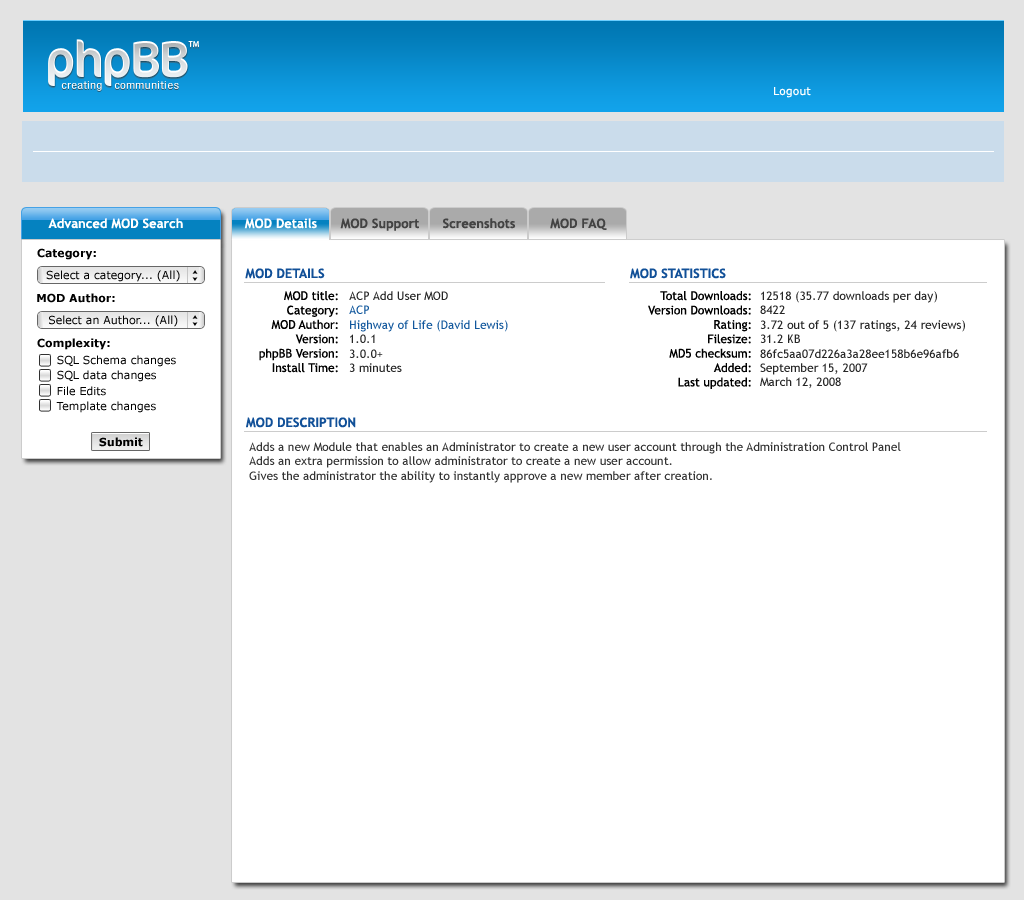
<style>
.page{position:relative;width:1024px;height:900px;background:#ffffff}
.page>*{position:absolute;margin:0}
.t1{font:11px "Verdana";color:#ffffff}
.t2{font:13px "TrebuchetMS-Bold";color:#ffffff}
.t3{font:13px "TrebuchetMS-Bold";color:#434343}
.t4{font:11px "Verdana-Bold";color:#000000}
.t5{font:11px "Verdana";color:#000000}
.t6{font:13px "TrebuchetMS-Bold";color:#115098}
.t7{font:12px "TrebuchetMS";color:#000000}
.t8{font:12px "TrebuchetMS";color:#12589d}
.t9{font:12px "TrebuchetMS";color:#262626}
.t10{font:12px "TrebuchetMS";color:#333333}
</style>
<div class="page">
<p class="t1" style="left:774px;top:87px;width:37px;height:11px">Logout</p>
<p class="t2" style="left:48px;top:218px;width:135px;height:11px">Advanced MOD Search</p>
<p class="t2" style="left:244px;top:218px;width:73px;height:11px">MOD Details</p>
<p class="t3" style="left:340px;top:218px;width:79px;height:13px">MOD Support</p>
<p class="t3" style="left:443px;top:218px;width:73px;height:11px">Screenshots</p>
<p class="t3" style="left:550px;top:218px;width:57px;height:12px">MOD FAQ</p>
<p class="t4" style="left:37px;top:248px;width:59px;height:12px">Category:</p>
<p class="t5" style="left:46px;top:270px;width:134px;height:12px">Select a category... (All)</p>
<p class="t6" style="left:245px;top:268px;width:80px;height:11px">MOD DETAILS</p>
<p class="t6" style="left:630px;top:268px;width:96px;height:11px">MOD STATISTICS</p>
<p class="t4" style="left:37px;top:293px;width:78px;height:10px">MOD Author:</p>
<p class="t7" style="left:259px;top:291px;width:79px;height:82px;text-align:right">MOD title:<br>Category:<br>MOD Author:<br>Version:<br>phpBB Version:<br>Install Time:</p>
<p class="t8" style="left:349px;top:291px;width:159px;height:81px"><span class="t9">ACP Add User MOD<br></span>ACP<br>Highway of Life (David Lewis)<br><span class="t9">1.0.1<br>3.0.0+<br>3 minutes</span></p>
<p class="t7" style="left:648px;top:291px;width:103px;height:98px;text-align:right">Total Downloads:<br>Version Downloads:<br>Rating:<br>Filesize:<br>MD5 checksum:<br>Added:<br>Last updated:</p>
<p class="t9" style="left:760px;top:291px;width:205px;height:98px">12518 (35.77 downloads per day)<br>8422<br>3.72 out of 5 (137 ratings, 24 reviews)<br>31.2 KB<br>86fc5aa07d226a3a28ee158b6e96afb6<br>September 15, 2007<br>March 12, 2008</p>
<p class="t5" style="left:49px;top:315px;width:129px;height:12px">Select an Author... (All)</p>
<p class="t4" style="left:37px;top:338px;width:73px;height:12px">Complexity:</p>
<p class="t5" style="left:57px;top:355px;width:119px;height:12px">SQL Schema changes</p>
<p class="t5" style="left:57px;top:370px;width:99px;height:12px">SQL data changes</p>
<p class="t5" style="left:57px;top:386px;width:49px;height:10px">File Edits</p>
<p class="t5" style="left:56px;top:401px;width:100px;height:12px">Template changes</p>
<p class="t6" style="left:246px;top:417px;width:110px;height:11px">MOD DESCRIPTION</p>
<p class="t4" style="left:99px;top:437px;width:44px;height:10px">Submit</p>
<p class="t10" style="left:249px;top:442px;width:652px;height:41px">Adds a new Module that enables an Administrator to create a new user account through the Administration Control Panel<br>Adds an extra permission to allow administrator to create a new user account.<br>Gives the administrator the ability to instantly approve a new member after creation.</p>
</div>
